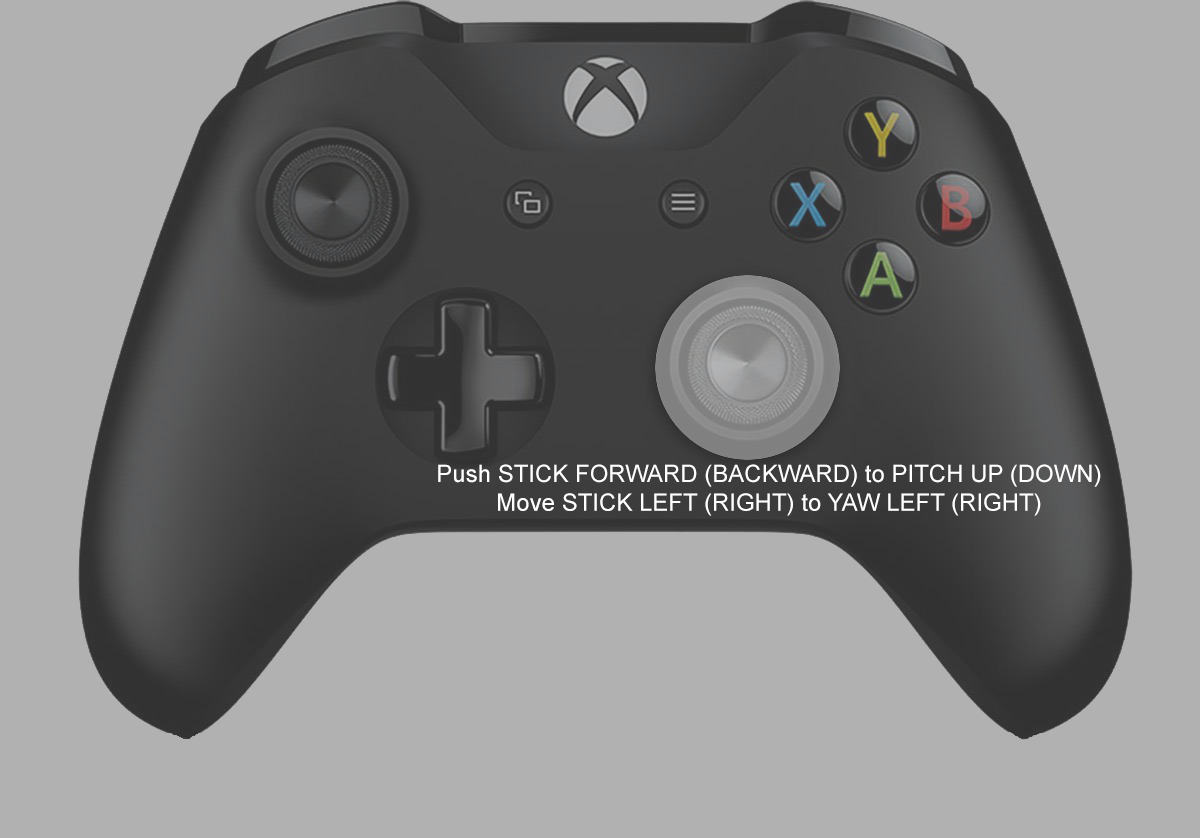
<style>
.page{position:relative;width:1200px;height:838px;background:#b1b1b1}
.page>*{position:absolute;margin:0}
.t1{font:24px "ArialMT";color:#ffffff}
</style>
<div class="page">
<p class="t1" style="left:438px;top:464px;width:663px;height:52px;text-align:center">Push STICK FORWARD (BACKWARD) to PITCH UP (DOWN)<br>Move STICK LEFT (RIGHT) to YAW LEFT (RIGHT)</p>
</div>
